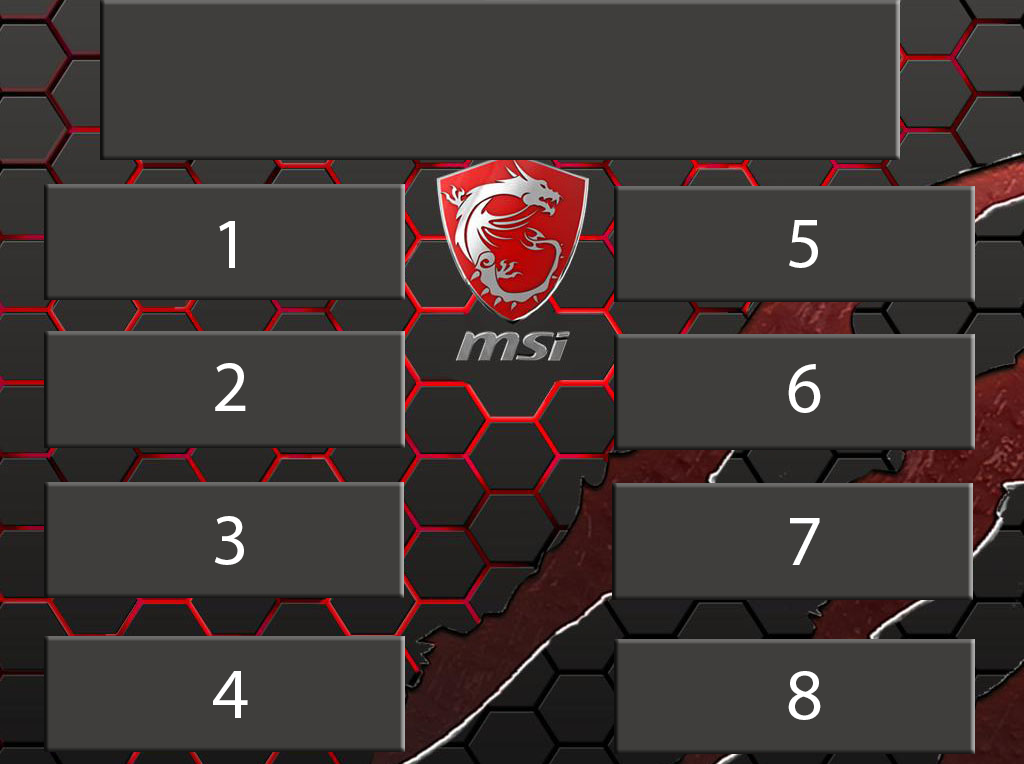
<style>
.page{position:relative;width:1024px;height:764px;background:#3f3e3c}
.page>*{position:absolute;margin:0}
.t1{font:72px "MyriadPro-Regular";color:#ffffff}
</style>
<div class="page">
<p class="t1" style="left:219px;top:221px;width:16px;height:47px">1</p>
<p class="t1" style="left:789px;top:220px;width:29px;height:48px">5</p>
<p class="t1" style="left:215px;top:363px;width:31px;height:48px">2</p>
<p class="t1" style="left:788px;top:364px;width:33px;height:49px">6</p>
<p class="t1" style="left:214px;top:516px;width:30px;height:49px">3</p>
<p class="t1" style="left:790px;top:518px;width:30px;height:47px">7</p>
<p class="t1" style="left:213px;top:671px;width:35px;height:47px">4</p>
<p class="t1" style="left:788px;top:671px;width:33px;height:49px">8</p>
</div>
